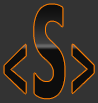
<style>
.page{position:relative;width:98px;height:103px;background:#333333}
.page>*{position:absolute;margin:0}
.t1{font:97.2px "Gadugi-Bold";color:#0d0d0d;scale:0.48 1}
.t2{font:129.6px "Gadugi-Bold";color:#0d0d0d;scale:0.48 1}
</style>
<div class="page">
<p class="t1" style="left:4px;top:4px;width:90px;height:95px">&lt;<span class="t2">S</span>&gt;</p>
</div>
